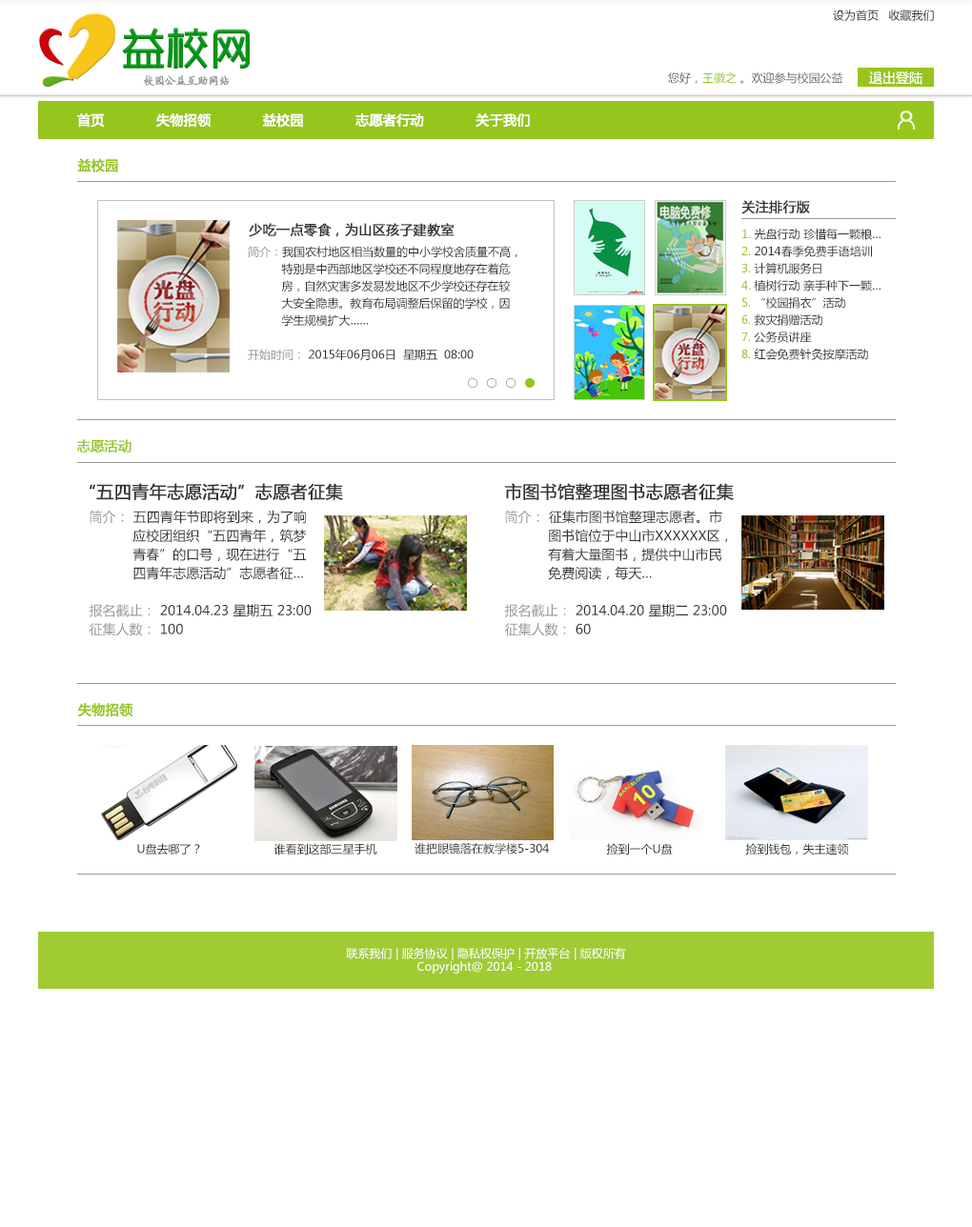
<style>
.page{position:relative;width:972px;height:1227px;background:#ffffff}
.page>*{position:absolute;margin:0}
.t1{font:11.4px "MicrosoftYaHei";color:#333333}
.t2{font:42.9px "RTWSYueGoTrial-Regular";color:#009414;font-weight:bold}
.t3{font:11.4px "FZYBKSJW--GB1-0";letter-spacing:-0.08em;color:#999999;font-weight:bold}
.t4{font:11.4px "MicrosoftYaHei";color:#666666}
.t5{font:11.4px "MicrosoftYaHei";color:#96c51d}
.t6{font:13.3px "MicrosoftYaHei";color:#fdfcfc}
.t7{font:13.3px "MicrosoftYaHei";color:#ffffff;font-weight:bold}
.t8{font:13.3px "MicrosoftYaHei";color:#96c51d;font-weight:bold}
.t9{font:13.3px "MicrosoftYaHei";color:#333333;font-weight:bold}
.t10{font:11.4px/17.1px "MicrosoftYaHei";color:#333333}
.t11{font:11.4px/17.1px "MicrosoftYaHei";color:#96c51d}
.t12{font:11.4px/17.1px "MicrosoftYaHei";color:#999999}
.t13{font:17.1px "MicrosoftYaHei";color:#333333;font-weight:bold}
.t14{font:13.3px/18.7px "MicrosoftYaHei";color:#333333}
.t15{font:13.3px/18.7px "MicrosoftYaHei";color:#999999}
.t16{font:11.4px/13.3px "MicrosoftYaHei";color:#ffffff}
</style>
<div class="page">
<p class="t1" style="left:833px;top:10px;width:101px;height:11px">设为首页   收藏我们</p>
<p class="t2" style="left:122px;top:28px;width:128px;height:42px">益校网</p>
<p class="t3" style="left:144px;top:75px;width:85px;height:11px">校园公益互助网站</p>
<p class="t4" style="left:668px;top:71px;width:174px;height:13px">您好，<span class="t5">王徽之 </span>。欢迎参与校园公益</p>
<p class="t6" style="left:869px;top:71px;width:53px;height:14px">退出登陆</p>
<p class="t7" style="left:77px;top:113px;width:453px;height:15px">首页            失物招领            益校园            志愿者行动            关于我们</p>
<p class="t8" style="left:77px;top:158px;width:41px;height:14px">益校园</p>
<p class="t9" style="left:741px;top:200px;width:69px;height:14px">关注排行版</p>
<p class="t9" style="left:249px;top:223px;width:205px;height:14px">少吃一点零食，为山区孩子建教室</p>
<p class="t10" style="left:741px;top:228px;width:139px;height:132px"><span class="t11">1. </span>光盘行动 珍惜每一颗粮…<br><span class="t11">2. </span>2014春季免费手语培训<br><span class="t11">3. </span>计算机服务日<br><span class="t11">4. </span>植树行动 亲手种下一颗…<br><span class="t11">5. </span>“校园捐衣”活动<br><span class="t11">6. </span>救灾捐赠活动<br><span class="t11">7. </span>公务员讲座<br><span class="t11">8. </span>红会免费针灸按摩活动</p>
<p class="t10" style="left:248px;top:246px;width:269px;height:115px"><span class="t12">简介：</span>我国农村地区相当数量的中小学校舍质量不高，<br>          特别是中西部地区学校还不同程度地存在着危<br>          房，自然灾害多发易发地区不少学校还存在较<br>          大安全隐患。教育布局调整后保留的学校，因<br>          学生规模扩大……<br><br><span class="t12">开始时间：</span> 2015年06月06日  星期五  08:00</p>
<p class="t8" style="left:77px;top:439px;width:54px;height:14px">志愿活动</p>
<p class="t13" style="left:89px;top:483px;width:254px;height:18px">“五四青年志愿活动”志愿者征集</p>
<p class="t13" style="left:505px;top:483px;width:229px;height:17px">市图书馆整理图书志愿者征集</p>
<p class="t14" style="left:89px;top:510px;width:223px;height:126px"><span class="t15">简介： </span>五四青年节即将到来，为了响<br>           应校团组织“五四青年，筑梦<br>           青春”的口号，现在进行“五<br>           四青年志愿活动”志愿者征…<br><br><span class="t15">报名截止： </span>2014.04.23 星期五 23:00<br><span class="t15">征集人数： </span>100</p>
<p class="t14" style="left:504px;top:510px;width:224px;height:126px"><span class="t15">简介： </span>征集市图书馆整理志愿者。市<br>           图书馆位于中山市XXXXXX区，<br>           有着大量图书，提供中山市民<br>           免费阅读，每天…<br><br><span class="t15">报名截止： </span>2014.04.20 星期二 23:00<br><span class="t15">征集人数： </span>60</p>
<p class="t8" style="left:78px;top:703px;width:55px;height:14px">失物招领</p>
<p class="t1" style="left:137px;top:843px;width:63px;height:13px">U盘去哪了？</p>
<p class="t1" style="left:273px;top:843px;width:104px;height:13px">谁看到这部三星手机</p>
<p class="t1" style="left:414px;top:842px;width:135px;height:13px">谁把眼镜落在教学楼5-304</p>
<p class="t1" style="left:606px;top:843px;width:67px;height:12px">捡到一个U盘</p>
<p class="t1" style="left:745px;top:843px;width:104px;height:13px">捡到钱包，失主速领</p>
<p class="t16" style="left:346px;top:947px;width:280px;height:27px;text-align:center">联系我们 | 服务协议 | 隐私权保护 | 开放平台 | 版权所有<br>Copyright@ 2014 - 2018</p>
</div>
